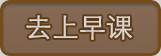
<style>
.page{position:relative;width:161px;height:56px}
.page>*{position:absolute;margin:0}
.t1{font:27px "STHeitiSC-Light";color:#dad3cf}
</style>
<div class="page">
<p class="t1" style="left:26px;top:15px;width:107px;height:25px">去上早课</p>
</div>
